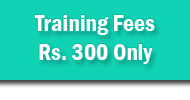
<style>
.page{position:relative;width:190px;height:100px;background:#10d2b4}
.page>*{position:absolute;margin:0}
.t1{font:24px "FranklinGothic-DemiCond";color:#ffffff}
</style>
<div class="page">
<p class="t1" style="left:34px;top:15px;width:121px;height:49px;text-align:center">Training Fees <br>Rs. 300 Only</p>
</div>
